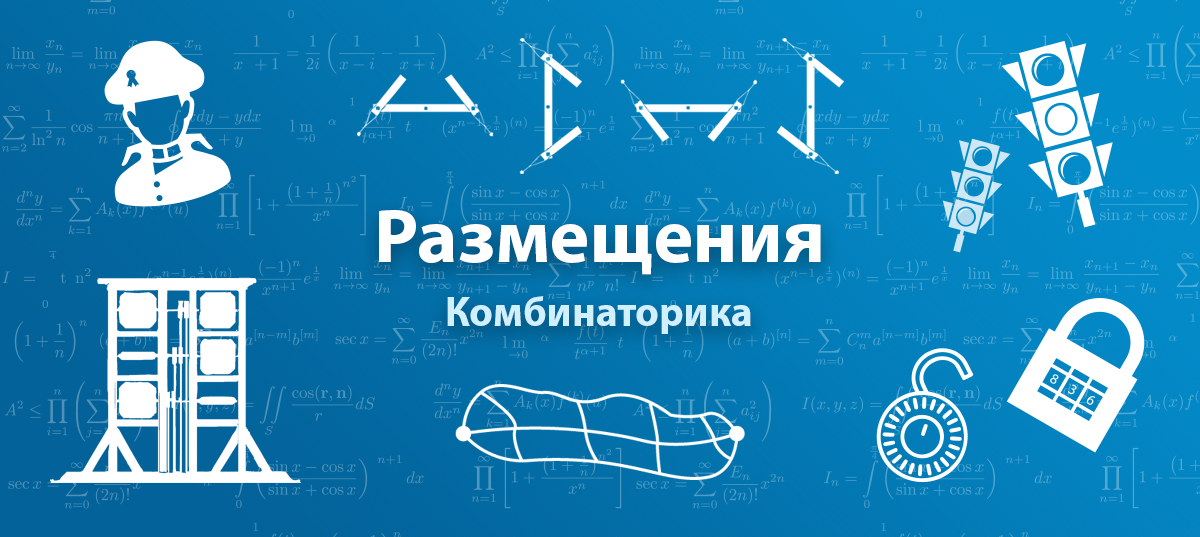
<style>
.page{position:relative;width:1200px;height:537px}
.page>*{position:absolute;margin:0}
.t1{font:76.9px "MyriadPro-Bold";color:#ffffff}
.t2{font:41.6px "MyriadPro-Bold";color:#d0efff}
</style>
<div class="page">
<p class="t1" style="left:379px;top:210px;width:442px;height:65px">Размещения</p>
<p class="t2" style="left:447px;top:296px;width:304px;height:38px">Комбинаторика</p>
</div>
